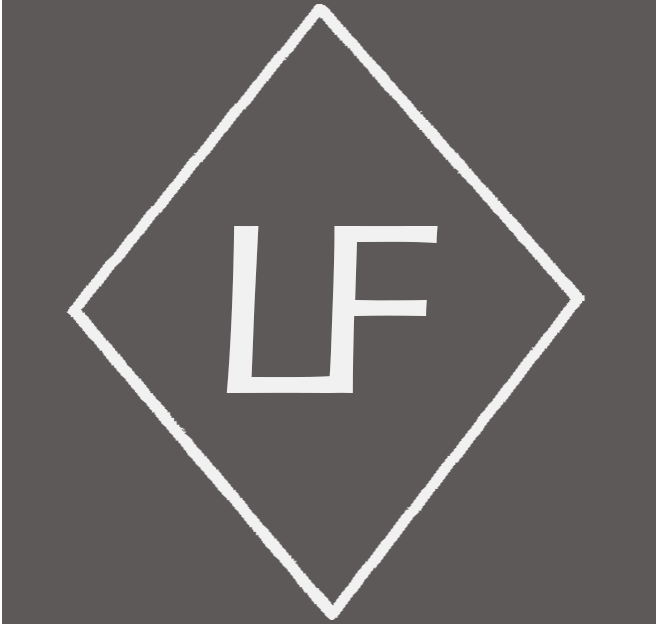
<style>
.page{position:relative;width:656px;height:624px;background:#5e5959}
.page>*{position:absolute;margin:0}
.t1{font:250px "ErasITC-Medium";color:#f2f1f1}
</style>
<div class="page">
<p class="t1" style="left:226px;top:226px;width:106px;height:167px">L</p>
<p class="t1" style="left:328px;top:226px;width:110px;height:167px">F</p>
</div>
